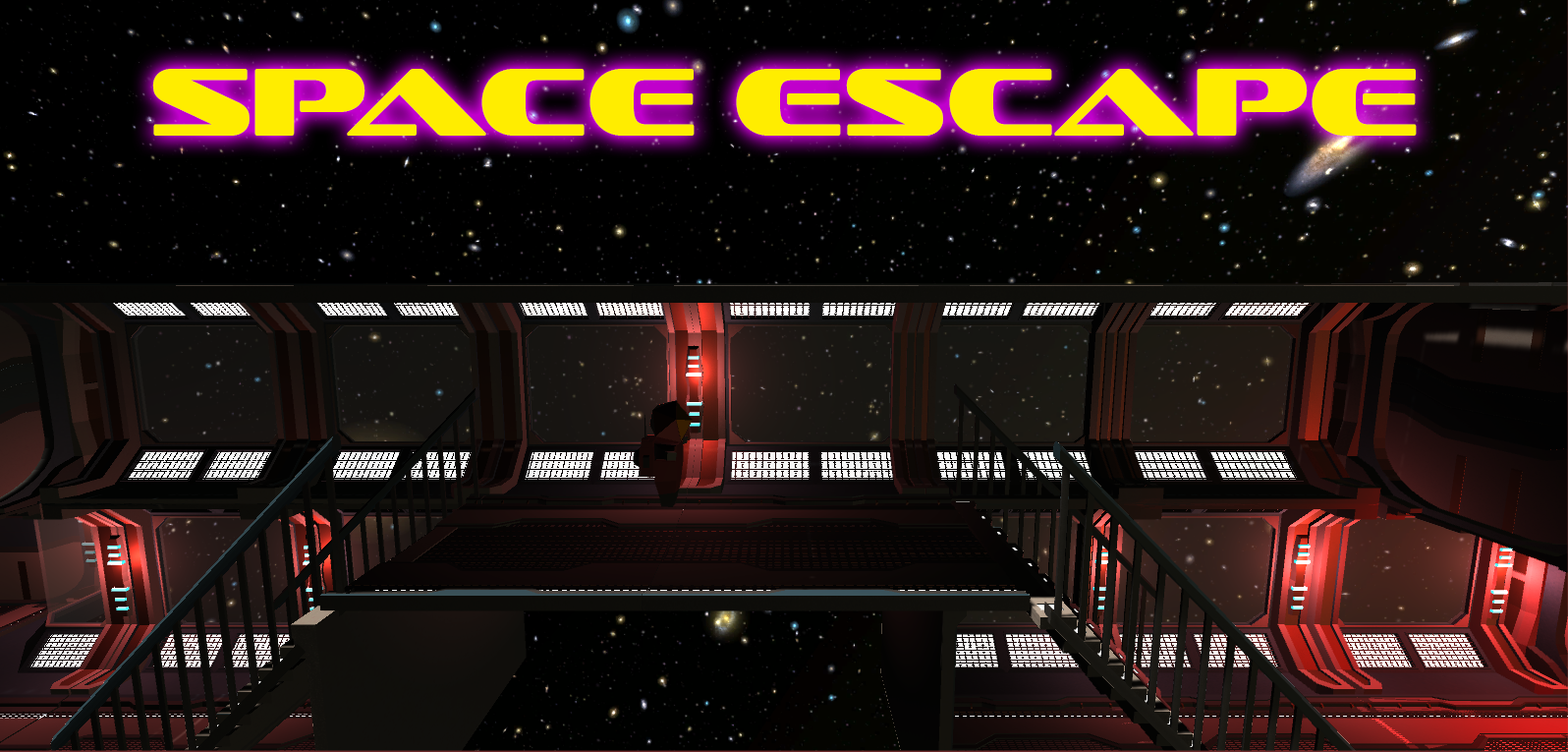
<style>
.page{position:relative;width:1568px;height:752px}
.page>*{position:absolute;margin:0}
.t1{font:98.2px "SofachromeRg-Regular";color:#ffed00}
</style>
<div class="page">
<p class="t1" style="left:152px;top:69px;width:1265px;height:67px">Space Escape</p>
</div>
